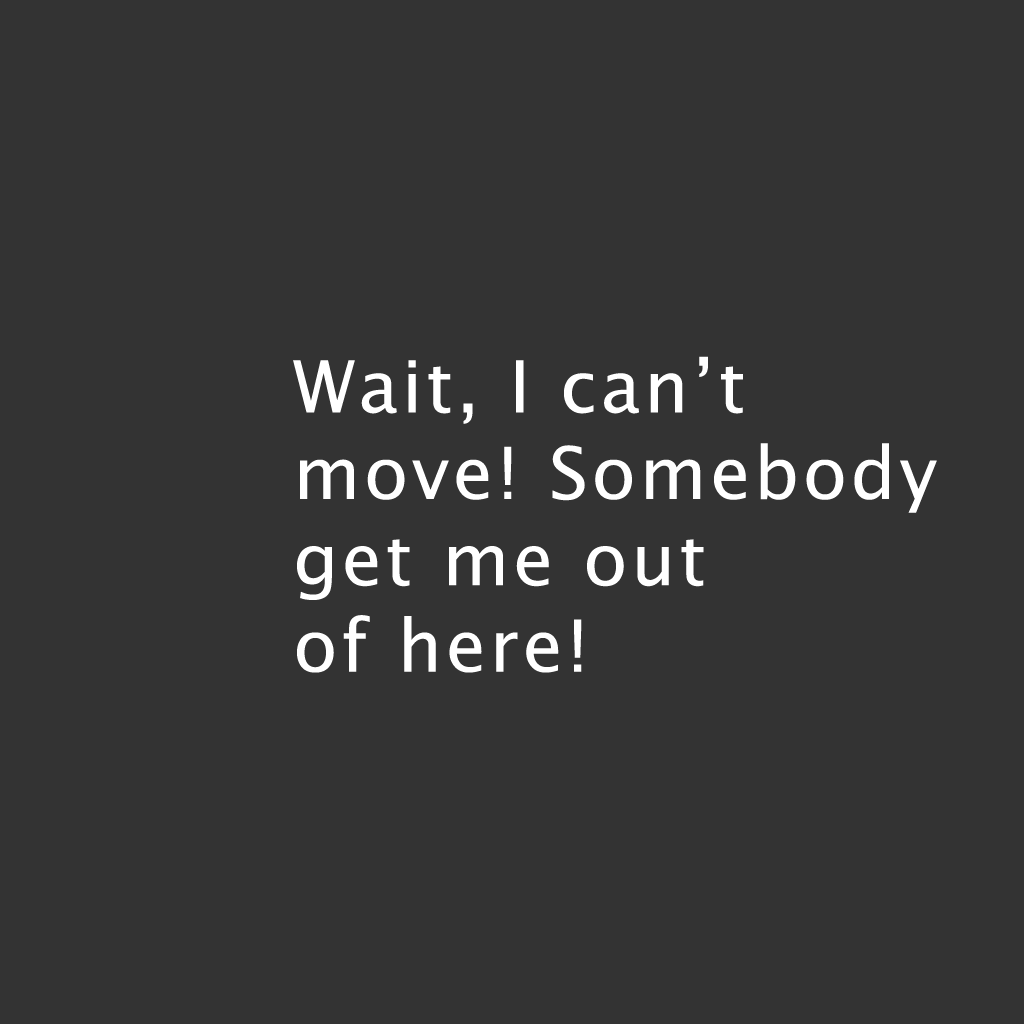
<style>
.page{position:relative;width:1024px;height:1024px;background:#333333}
.page>*{position:absolute;margin:0}
.t1{font:72px "LucidaSans";letter-spacing:0.05em;color:#ffffff}
</style>
<div class="page">
<p class="t1" style="left:293px;top:356px;width:644px;height:317px">Wait, I can’t<br>move! Somebody<br>get me out <br>of here!</p>
</div>
